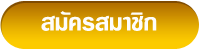
<style>
.page{position:relative;width:200px;height:50px}
.page>*{position:absolute;margin:0}
.t1{font:33.3px "DSNLardPhrao";color:#fefdfb}
</style>
<div class="page">
<p class="t1" style="left:41px;top:11px;width:116px;height:20px">สมัครสมาชิก</p>
</div>
